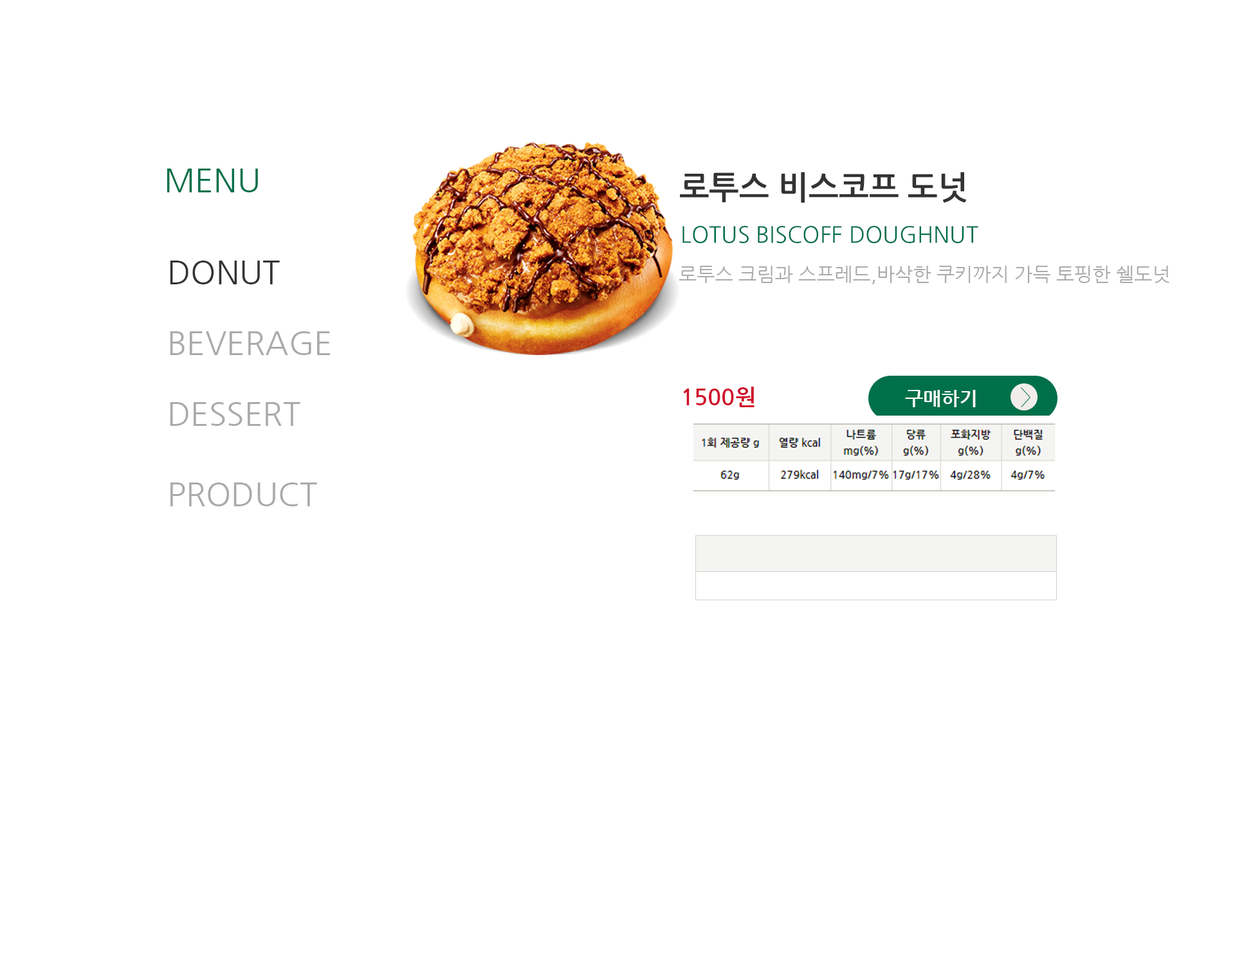
<style>
.page{position:relative;width:1235px;height:965px;background:#ffffff}
.page>*{position:absolute;margin:0}
.t1{font:32.2px "NanumGothic";color:#00704a}
.t2{font:32.2px "NanumGothicBold";color:#333333}
.t3{font:22.5px "NanumGothic";color:#00704a}
.t4{font:32.2px "NanumGothic";color:#333333}
.t5{font:19.3px "NanumGothic";color:#aaaaaa}
.t6{font:32.2px "NanumGothic";color:#aaaaaa}
.t7{font:22.5px "NanumGothicBold";color:#d0112b}
.t8{font:19.3px "NanumGothicBold";color:#ffffff}
</style>
<div class="page">
<p class="t1" style="left:167px;top:169px;width:91px;height:23px">MENU</p>
<p class="t2" style="left:680px;top:172px;width:286px;height:31px">로투스 비스코프 도넛</p>
<p class="t3" style="left:683px;top:226px;width:296px;height:17px">LOTUS BISCOFF DOUGHNUT</p>
<p class="t4" style="left:170px;top:261px;width:110px;height:23px">DONUT</p>
<p class="t5" style="left:679px;top:266px;width:491px;height:18px">로투스 크림과 스프레드,바삭한 쿠키까지 가득 토핑한 쉘도넛</p>
<p class="t6" style="left:170px;top:331px;width:160px;height:24px">BEVERAGE</p>
<p class="t7" style="left:683px;top:387px;width:72px;height:20px">1500원</p>
<p class="t8" style="left:905px;top:390px;width:71px;height:17px">구매하기</p>
<p class="t6" style="left:170px;top:402px;width:130px;height:24px">DESSERT</p>
<p class="t6" style="left:171px;top:483px;width:146px;height:23px">PRODUCT</p>
</div>
